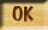
<style>
.page{position:relative;width:48px;height:30px}
.page>*{position:absolute;margin:0}
.t1{font:18px "MarkerFelt-Wide"}
</style>
<div class="page">
<p class="t1" style="left:12px;top:6px;width:22px;height:16px">OK</p>
</div>
